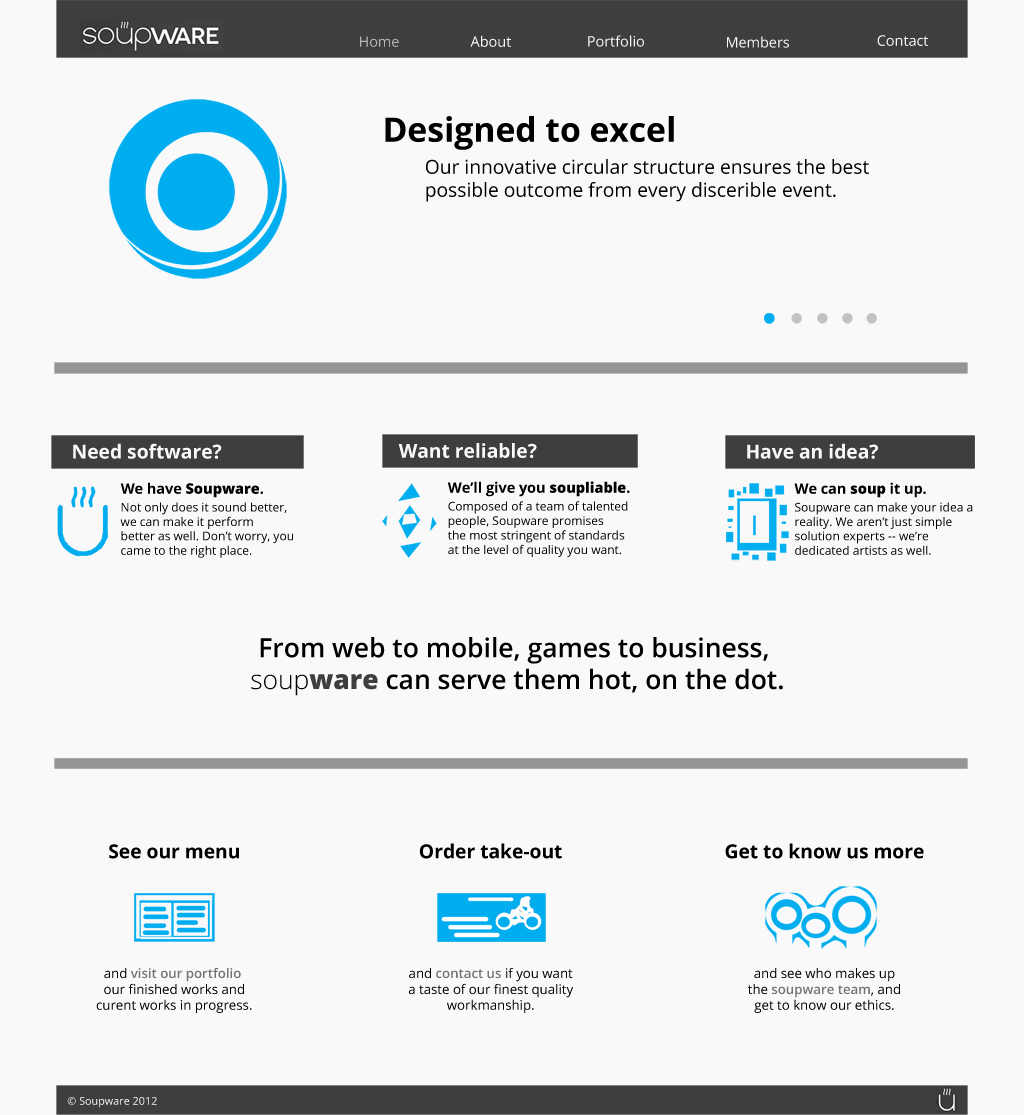
<style>
.page{position:relative;width:1024px;height:1115px;background:#f9f9f9}
.page>*{position:absolute;margin:0}
.t1{font:14.4px "OpenSans";color:#b7b7b7}
.t2{font:14.4px "OpenSans";color:#f9f9f9}
.t3{font:33.7px "OpenSans-Bold";color:#000000}
.t4{font:19.2px "OpenSans";color:#000000}
.t5{font:19.2px "OpenSans-Bold";color:#f9f9f9}
.t6{font:14.4px "OpenSans-Extrabold";color:#000000}
.t7{font:14.4px "OpenSans-Bold";color:#000000}
.t8{font:12px "OpenSans";color:#000000}
.t9{font:26.4px "OpenSans-Semibold";color:#000000}
.t10{font:26.4px "OpenSans-Light";color:#000000}
.t11{font:26.4px "OpenSans-Extrabold";color:#3e3e3e}
.t12{font:13.2px "OpenSans";color:#000000}
.t13{font:19.2px "OpenSans-Bold";color:#000000}
.t14{font:13.2px "OpenSans-Semibold";color:#757575}
.t15{font:10.8px "OpenSans";color:#f9f9f9}
</style>
<div class="page">
<p class="t1" style="left:360px;top:36px;width:39px;height:11px">Home</p>
<p class="t2" style="left:470px;top:35px;width:41px;height:12px">About</p>
<p class="t2" style="left:588px;top:35px;width:56px;height:12px">Portfolio</p>
<p class="t2" style="left:727px;top:36px;width:62px;height:12px">Members</p>
<p class="t2" style="left:877px;top:35px;width:51px;height:11px">Contact</p>
<p class="t3" style="left:385px;top:116px;width:289px;height:34px">Designed to excel</p>
<p class="t4" style="left:426px;top:159px;width:443px;height:43px">Our innovative circular structure ensures the best<br>possible outcome from every discerible event.</p>
<p class="t5" style="left:73px;top:443px;width:149px;height:16px">Need software?</p>
<p class="t5" style="left:398px;top:443px;width:139px;height:15px">Want reliable?</p>
<p class="t5" style="left:747px;top:443px;width:131px;height:16px">Have an idea?</p>
<p class="t6" style="left:120px;top:482px;width:143px;height:16px"><span class="t7">We have </span>Soupware<span class="t7">.</span></p>
<p class="t7" style="left:447px;top:481px;width:183px;height:16px">We’ll give you <span class="t6">soupliable</span>.</p>
<p class="t7" style="left:794px;top:482px;width:132px;height:16px">We can <span class="t6">soup</span> it up.</p>
<p class="t8" style="left:120px;top:502px;width:173px;height:56px">Not only does it sound better, <br>we can make it perform<br>better as well. Don’t worry, you<br>came to the right place.</p>
<p class="t8" style="left:448px;top:501px;width:180px;height:56px">Composed of a team of talented<br>people, Soupware promises<br>the most stringent of standards<br>at the level of quality you want.</p>
<p class="t8" style="left:795px;top:502px;width:178px;height:53px">Soupware can make your idea a<br>reality. We aren’t just simple<br>solution experts -- we’re <br>dedicated artists as well.</p>
<p class="t9" style="left:251px;top:637px;width:532px;height:59px;text-align:center">From web to mobile, games to business, <br><span class="t10">soup</span><span class="t11">ware</span> can serve them hot, on the dot.</p>
<p class="t12" style="left:96px;top:844px;width:156px;height:169px;text-align:center"><span class="t13">See our menu<br><br><br><br></span>and <span class="t14">visit our portfolio <br></span>our finished works and<br>curent works in progress.</p>
<p class="t12" style="left:408px;top:843px;width:165px;height:170px;text-align:center"><span class="t13">Order take-out<br><br><br><br></span>and <span class="t14">contact us</span> if you want<br>a taste of our finest quality<br>workmanship.</p>
<p class="t12" style="left:725px;top:843px;width:199px;height:170px;text-align:center"><span class="t13">Get to know us more<br><br><br><br></span>and see who makes up<br>the <span class="t14">soupware team</span>, and<br>get to know our ethics.</p>
<p class="t15" style="left:67px;top:1097px;width:90px;height:11px">© Soupware 2012</p>
</div>
